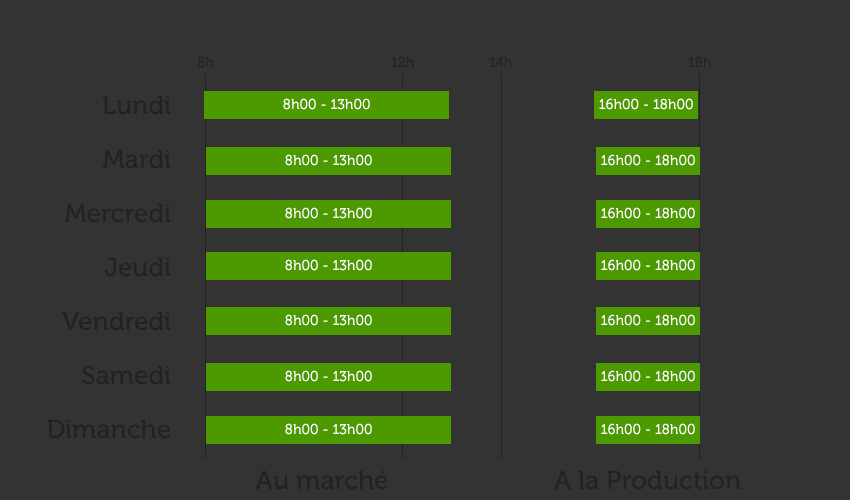
<style>
.page{position:relative;width:850px;height:500px;background:#333333}
.page>*{position:absolute;margin:0}
.t1{font:14px "Museo-500";color:#222222}
.t2{font:26px/54px "Museo-500";color:#222222}
.t3{font:14px "Museo-500";color:#ffffff}
.t4{font:26px "Museo-500";color:#222222}
</style>
<div class="page">
<p class="t1" style="left:198px;top:56px;width:16px;height:12px">8h</p>
<p class="t1" style="left:391px;top:56px;width:23px;height:11px">12h</p>
<p class="t1" style="left:490px;top:57px;width:22px;height:10px">14h</p>
<p class="t1" style="left:688px;top:56px;width:23px;height:12px">18h</p>
<p class="t2" style="left:47px;top:95px;width:124px;height:344px;text-align:right">Lundi<br>Mardi<br>Mercredi<br>Jeudi<br>Vendredi<br>Samedi<br>Dimanche</p>
<p class="t3" style="left:283px;top:98px;width:87px;height:12px">8h00 - 13h00</p>
<p class="t3" style="left:599px;top:98px;width:94px;height:12px">16h00 - 18h00</p>
<p class="t3" style="left:285px;top:154px;width:87px;height:12px">8h00 - 13h00</p>
<p class="t3" style="left:601px;top:154px;width:94px;height:12px">16h00 - 18h00</p>
<p class="t3" style="left:285px;top:207px;width:87px;height:12px">8h00 - 13h00</p>
<p class="t3" style="left:601px;top:207px;width:94px;height:12px">16h00 - 18h00</p>
<p class="t3" style="left:285px;top:259px;width:87px;height:12px">8h00 - 13h00</p>
<p class="t3" style="left:601px;top:259px;width:94px;height:12px">16h00 - 18h00</p>
<p class="t3" style="left:285px;top:314px;width:87px;height:12px">8h00 - 13h00</p>
<p class="t3" style="left:601px;top:314px;width:94px;height:12px">16h00 - 18h00</p>
<p class="t3" style="left:285px;top:370px;width:87px;height:12px">8h00 - 13h00</p>
<p class="t3" style="left:601px;top:370px;width:94px;height:12px">16h00 - 18h00</p>
<p class="t3" style="left:285px;top:423px;width:87px;height:12px">8h00 - 13h00</p>
<p class="t3" style="left:601px;top:423px;width:94px;height:12px">16h00 - 18h00</p>
<p class="t4" style="left:255px;top:470px;width:133px;height:20px">Au marché</p>
<p class="t4" style="left:554px;top:470px;width:187px;height:20px">A la Production</p>
</div>
